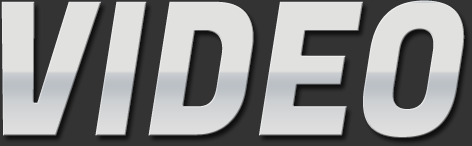
<style>
.page{position:relative;width:472px;height:146px;background:#333333}
.page>*{position:absolute;margin:0}
.t1{font:185.2px "FugazOne-Regular";color:#dfdfdf;scale:0.89 1}
</style>
<div class="page">
<p class="t1" style="left:1px;top:0px;width:464px;height:138px">VIDEO</p>
</div>
